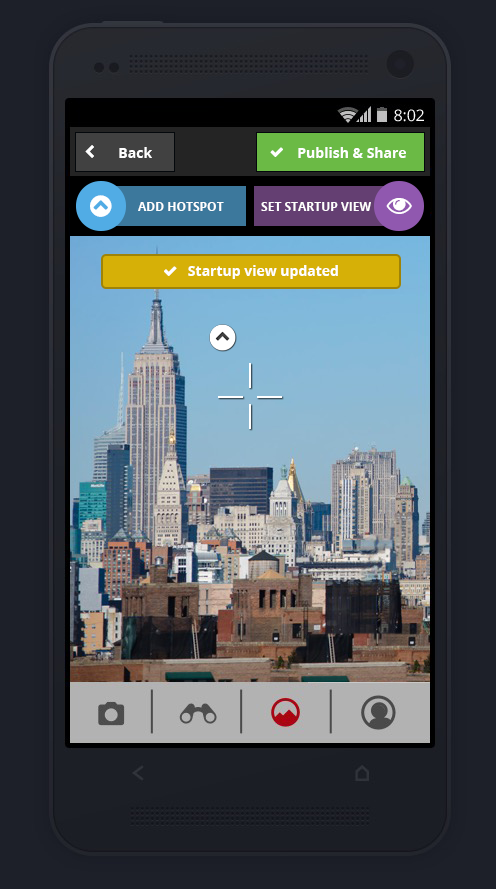
<style>
.page{position:relative;width:496px;height:889px}
.page>*{position:absolute;margin:0}
.t1{font:14px "OpenSans-Bold";color:#ffffff}
.t2{font:12px "OpenSans-Bold";color:#ffffff}
</style>
<div class="page">
<p class="t1" style="left:119px;top:147px;width:33px;height:11px">Back</p>
<p class="t1" style="left:298px;top:147px;width:108px;height:11px">Publish &amp; Share</p>
<p class="t2" style="left:138px;top:202px;width:86px;height:9px">ADD HOTSPOT</p>
<p class="t2" style="left:261px;top:202px;width:110px;height:9px">SET STARTUP VIEW</p>
</div>
